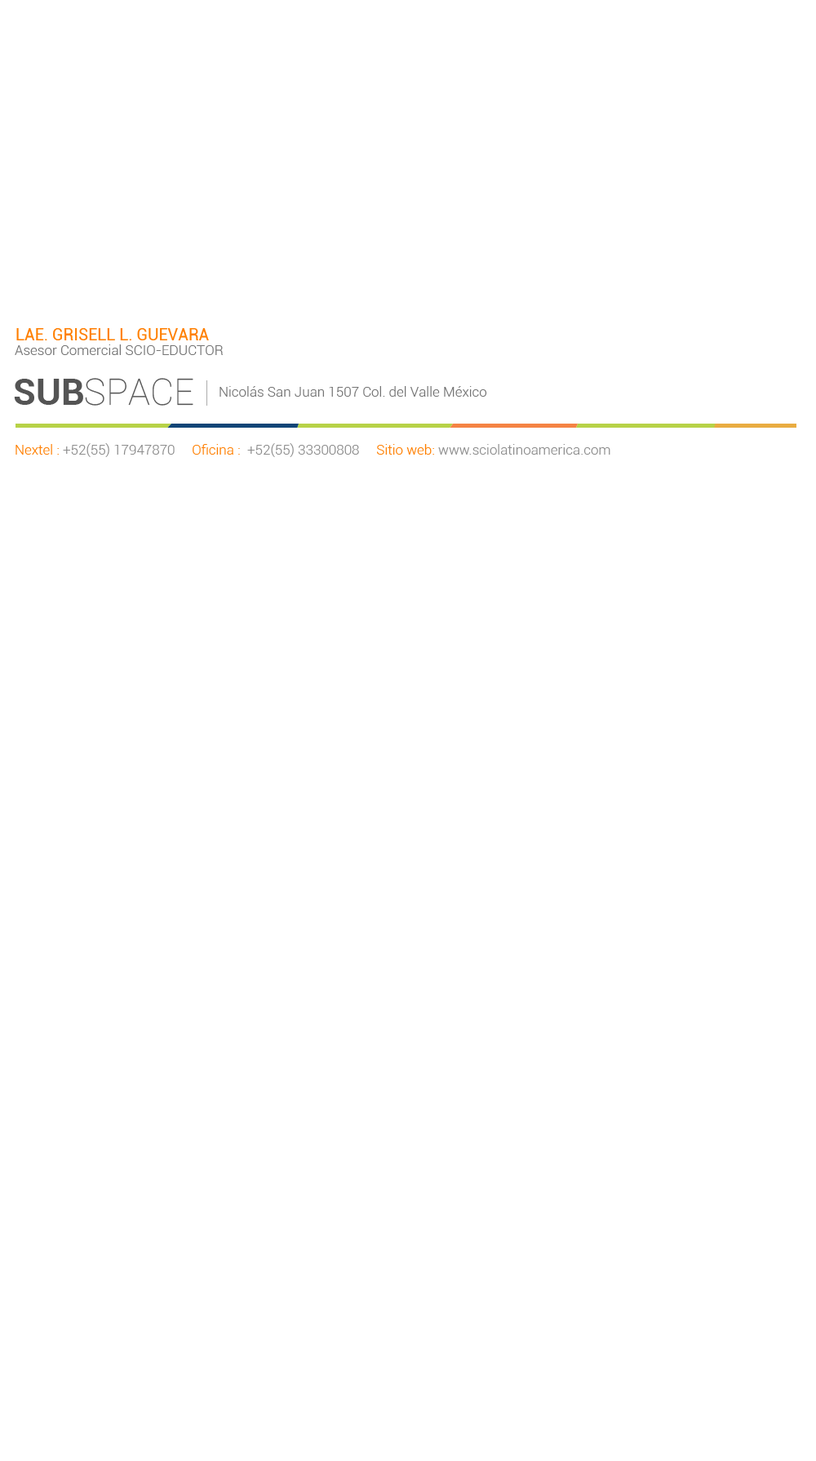
<style>
.page{position:relative;width:816px;height:1461px;background:#ffffff}
.page>*{position:absolute;margin:0}
.t1{font:16.3px "Roboto-Regular";color:#ff7f00}
.t2{font:13.9px "Roboto-Light";color:#747474}
.t3{font:36.7px "Roboto-Thin";color:#545454;text-transform:uppercase}
.t4{font:36.7px "Roboto-Bold";color:#545454;text-transform:uppercase}
.t5{font:13.9px "Roboto-Light";color:#8d8d8d}
.t6{font:13.9px "Roboto-Light";color:#ff7f00}
</style>
<div class="page">
<p class="t1" style="left:16px;top:328px;width:193px;height:12px">LAE. GRISELL L. GUEVARA</p>
<p class="t2" style="left:15px;top:344px;width:208px;height:11px">Asesor Comercial SCIO-EDUCTOR</p>
<p class="t3" style="left:14px;top:378px;width:179px;height:28px"><span class="t4">Sub</span>Space</p>
<p class="t2" style="left:220px;top:386px;width:267px;height:11px">Nicolás San Juan 1507 Col. del Valle México</p>
<p class="t5" style="left:16px;top:443px;width:595px;height:14px"><span class="t6">Nextel :</span> +52(55) 17947870     <span class="t6">Oficina :</span>  +52(55) 33300808     <span class="t6">Sitio web:</span> www.sciolatinoamerica.com</p>
</div>
